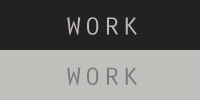
<style>
.page{position:relative;width:200px;height:100px;background:#c1bfbc}
.page>*{position:absolute;margin:0}
.t1{font:25.4px "OratorStd";color:#bdb9b9;font-variant:small-caps;scale:1.23 1}
.t2{font:25.4px "OratorStd";color:#757b7e;font-variant:small-caps;scale:1.23 1}
</style>
<div class="page">
<p class="t1" style="left:67px;top:17px;width:70px;height:18px">WORK</p>
<p class="t2" style="left:67px;top:67px;width:70px;height:18px">WORK</p>
</div>
